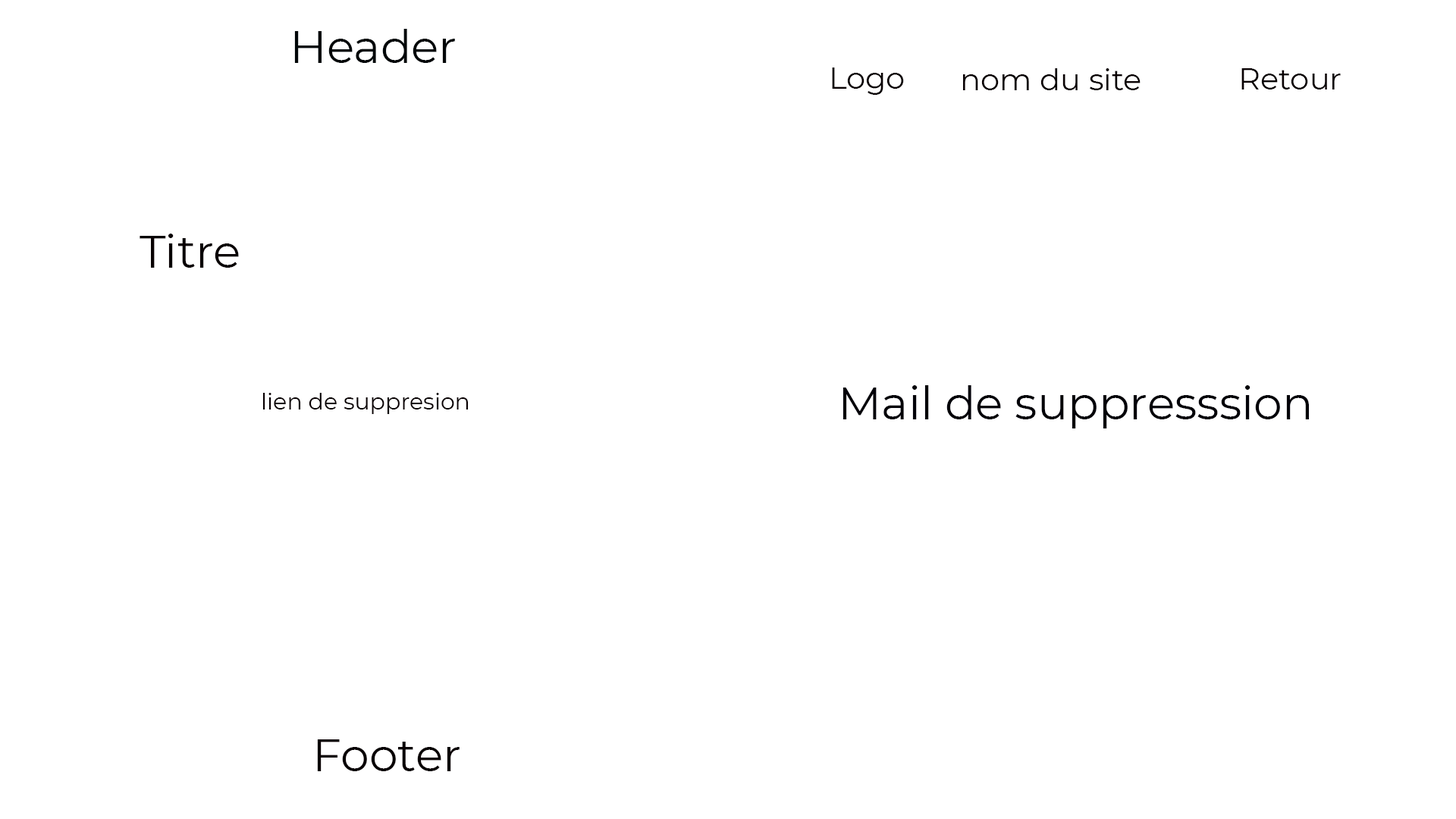
<style>
.page{position:relative;width:1456px;height:819px;background:#ffffff}
.page>*{position:absolute;margin:0}
.t1{font:45.5px "Montserrat-Regular";color:#000608}
.t2{font:30.3px "Montserrat-Regular";color:#080002}
.t3{font:45.5px "Montserrat-Regular";color:#080002}
.t4{font:45.5px "Montserrat-Regular";color:#010008}
.t5{font:22.7px "Montserrat-Regular";color:#080002}
</style>
<div class="page">
<p class="t1" style="left:294px;top:29px;width:161px;height:34px">Header</p>
<p class="t2" style="left:832px;top:67px;width:72px;height:28px">Logo</p>
<p class="t2" style="left:963px;top:68px;width:178px;height:22px">nom du site</p>
<p class="t2" style="left:1241px;top:68px;width:100px;height:21px">Retour</p>
<p class="t3" style="left:140px;top:234px;width:99px;height:34px">Titre</p>
<p class="t4" style="left:842px;top:385px;width:467px;height:43px">Mail de suppresssion</p>
<p class="t5" style="left:262px;top:393px;width:207px;height:21px">lien de suppresion</p>
<p class="t3" style="left:317px;top:739px;width:143px;height:32px">Footer</p>
</div>
